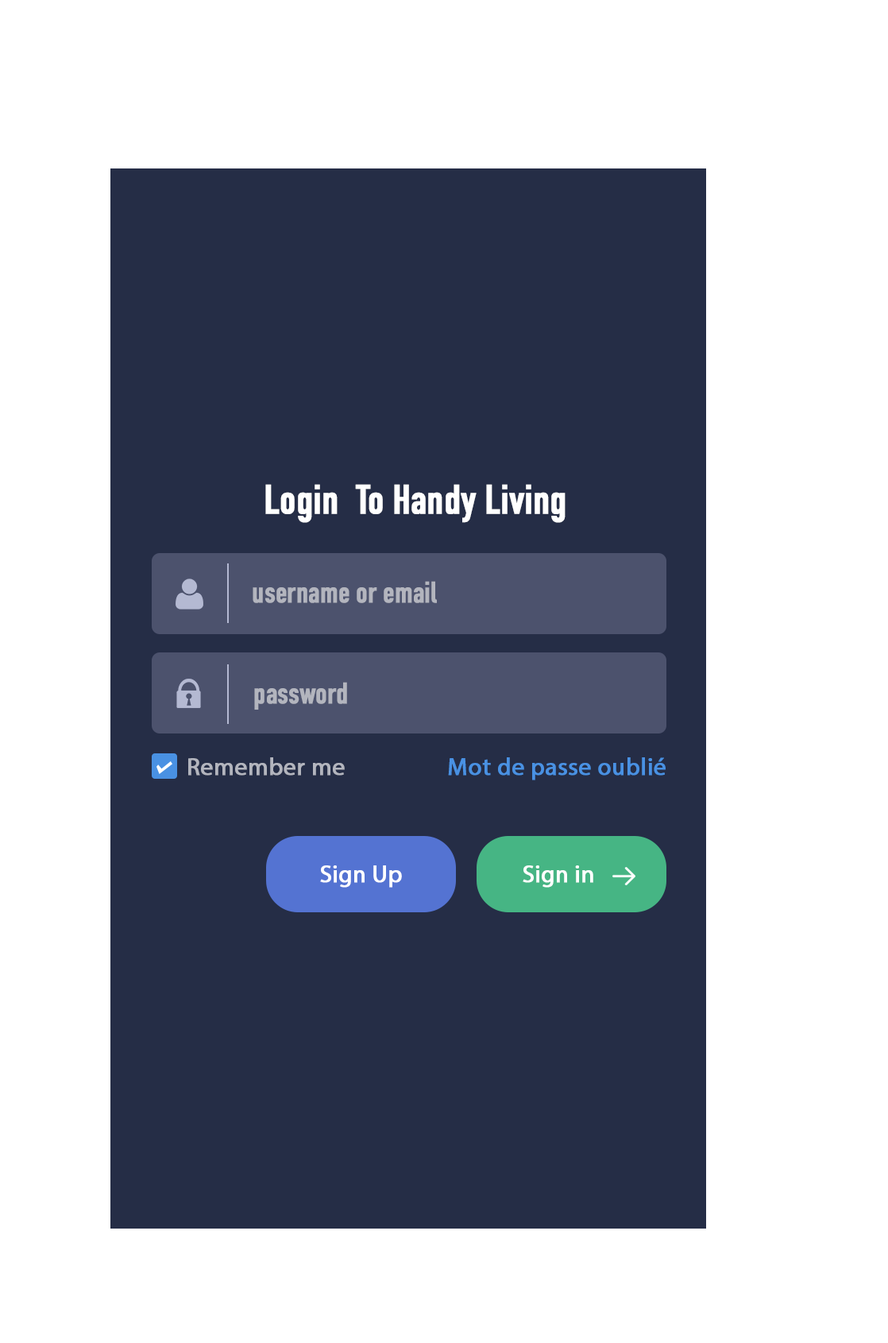
<style>
.page{position:relative;width:888px;height:1343px;background:#ffffff}
.page>*{position:absolute;margin:0}
.t1{font:40.5px "DINCondensed-Bold";color:#ffffff;font-weight:bold}
.t2{font:29.4px "DINCondensed-Bold";color:#b3b5be;font-weight:bold}
.t3{font:24.6px "MyriadPro-Regular";color:#b3b5be;font-weight:bold}
.t4{font:24.6px "MyriadPro-Regular";color:#4991e3;font-weight:bold}
.t5{font:23.8px "MyriadPro-Regular";color:#ffffff;font-weight:bold}
</style>
<div class="page">
<p class="t1" style="left:265px;top:484px;width:301px;height:39px">Login  To Handy Living</p>
<p class="t2" style="left:253px;top:581px;width:184px;height:22px">username or email</p>
<p class="t2" style="left:254px;top:682px;width:93px;height:27px">password</p>
<p class="t3" style="left:188px;top:757px;width:157px;height:18px">Remember me</p>
<p class="t4" style="left:448px;top:757px;width:218px;height:23px">Mot de passe oublié</p>
<p class="t5" style="left:320px;top:865px;width:82px;height:22px">Sign Up</p>
<p class="t5" style="left:523px;top:865px;width:70px;height:22px">Sign in</p>
</div>
